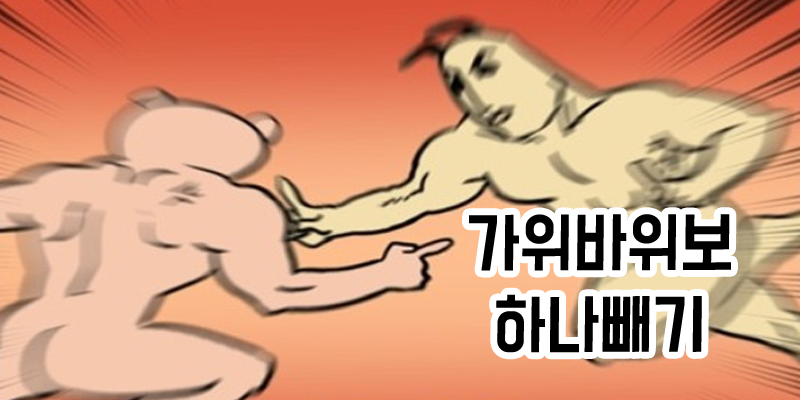
<style>
.page{position:relative;width:800px;height:400px}
.page>*{position:absolute;margin:0}
.t1{font:59px/40.9px "BMDoHyeon";color:#000000;scale:0.95 1}
</style>
<div class="page">
<p class="t1" style="left:469px;top:214px;width:262px;height:139px;text-align:center">가위바위보<br><br>하나빼기</p>
</div>
